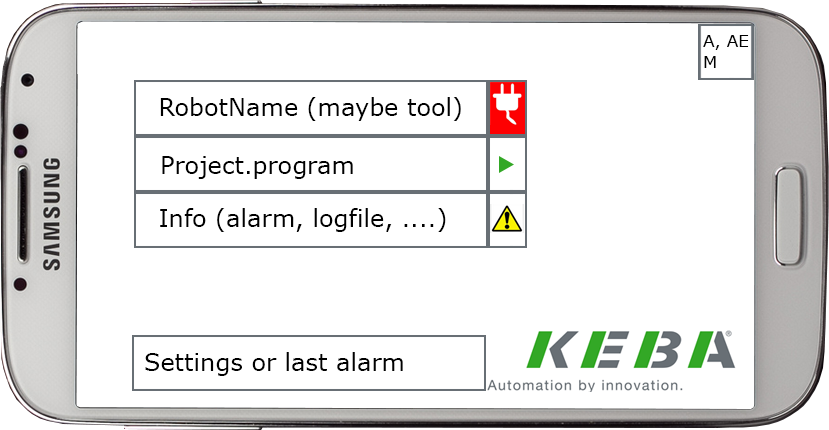
<style>
.page{position:relative;width:829px;height:430px;background:#ffffff}
.page>*{position:absolute;margin:0}
.t1{font:17.3px "Verdana";color:#000000}
.t2{font:24px "Verdana";color:#000000}
</style>
<div class="page">
<p class="t1" style="left:703px;top:35px;width:46px;height:33px">A, AE<br>M</p>
<p class="t2" style="left:160px;top:97px;width:301px;height:24px">RobotName (maybe tool)</p>
<p class="t2" style="left:162px;top:156px;width:191px;height:23px">Project.program</p>
<p class="t2" style="left:160px;top:208px;width:286px;height:24px">Info (alarm, logfile, ....)</p>
<p class="t2" style="left:145px;top:352px;width:258px;height:24px">Settings or last alarm</p>
</div>
